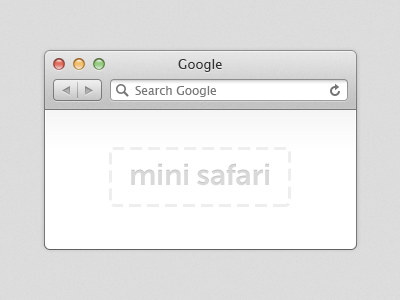
<style>
.page{position:relative;width:400px;height:300px;background:#ffffff}
.page>*{position:absolute;margin:0}
.t1{font:13px "LucidaGrande";color:#333333}
.t2{font:12px "LucidaGrande";letter-spacing:-0.01em;color:#787878}
.t3{font:30px "MuseoSans-700";letter-spacing:-0.01em;color:#d9d9d9}
</style>
<div class="page">
<p class="t1" style="left:178px;top:59px;width:44px;height:13px">Google</p>
<p class="t2" style="left:135px;top:86px;width:81px;height:11px">Search Google</p>
<p class="t3" style="left:131px;top:163px;width:138px;height:23px">mini safari</p>
</div>
